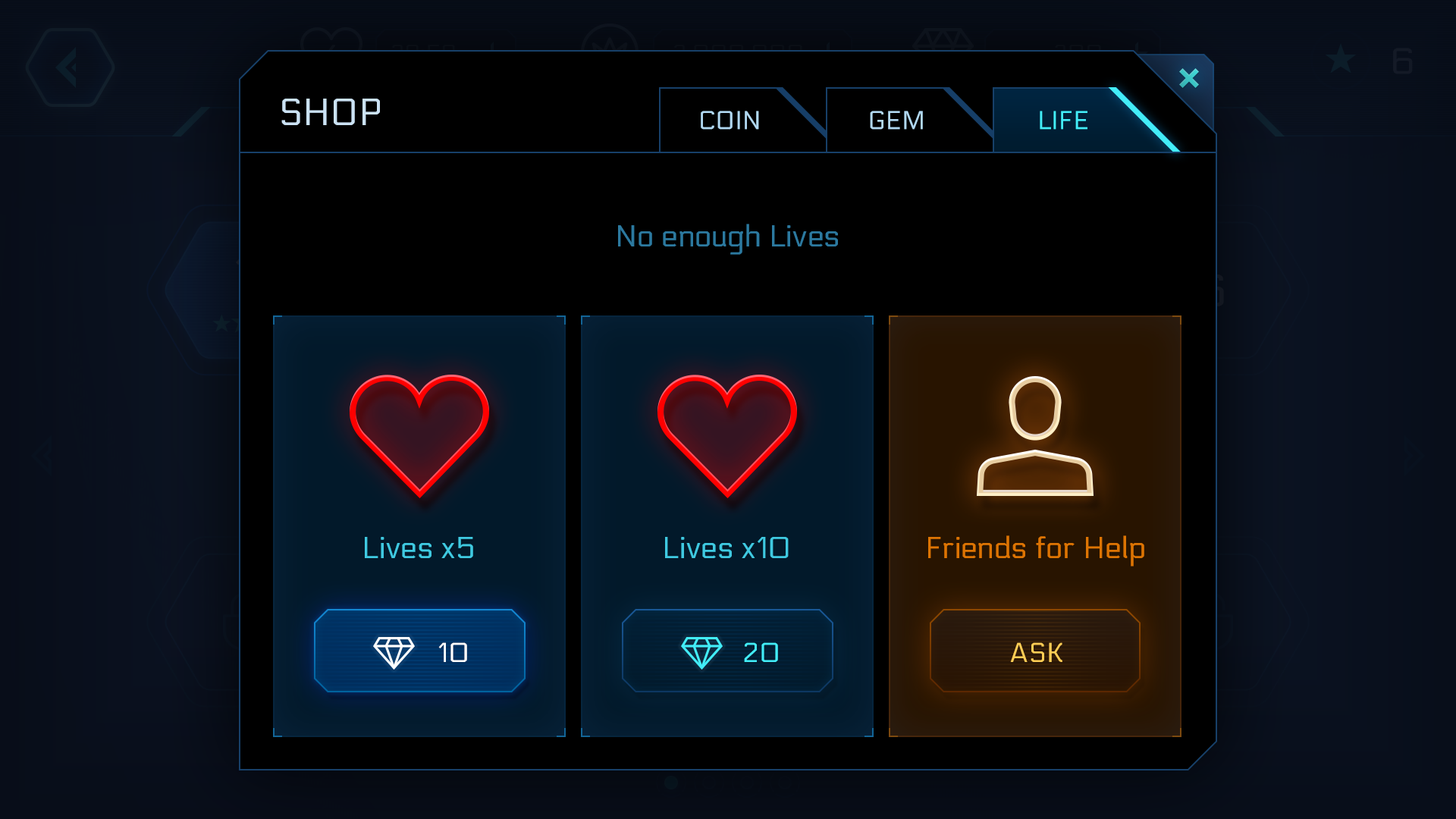
<style>
.page{position:relative;width:1456px;height:819px;background:#000000}
.page>*{position:absolute;margin:0}
.t1{font:37.9px "Electrolize-Regular";color:#cbe2f4;text-transform:uppercase}
.t2{font:25.8px "Electrolize-Regular";color:#b1d8f1;text-transform:uppercase}
.t3{font:25.8px "Electrolize-Regular";color:#43edf8;text-transform:uppercase}
.t4{font:30.3px "Electrolize-Regular";color:#2c799f}
.t5{font:30.3px "Electrolize-Regular";color:#3fc9e1}
.t6{font:30.3px "Electrolize-Regular";color:#dd7403}
.t7{font:27.3px "Electrolize-Regular";color:#ffffff;text-transform:uppercase}
.t8{font:27.3px "Electrolize-Regular";color:#42edf8;text-transform:uppercase}
.t9{font:27.3px "Electrolize-Regular";color:#ffcd55;text-transform:uppercase}
</style>
<div class="page">
<p class="t1" style="left:281px;top:99px;width:99px;height:26px">SHOP</p>
<p class="t2" style="left:701px;top:111px;width:58px;height:19px">coin</p>
<p class="t2" style="left:870px;top:111px;width:53px;height:19px">Gem</p>
<p class="t3" style="left:1040px;top:111px;width:47px;height:19px">life</p>
<p class="t3" style="left:1040px;top:111px;width:47px;height:19px">lIFE</p>
<p class="t4" style="left:618px;top:224px;width:220px;height:31px">No enough Lives</p>
<p class="t5" style="left:365px;top:537px;width:108px;height:21px">Lives x5</p>
<p class="t5" style="left:665px;top:537px;width:124px;height:21px">Lives x10</p>
<p class="t6" style="left:928px;top:535px;width:216px;height:31px">Friends for Help</p>
<p class="t7" style="left:438px;top:642px;width:29px;height:20px">10</p>
<p class="t7" style="left:438px;top:642px;width:29px;height:20px">10</p>
<p class="t8" style="left:744px;top:642px;width:34px;height:20px">20</p>
<p class="t9" style="left:1010px;top:642px;width:52px;height:20px">Ask</p>
</div>
